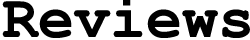
<style>
.page{position:relative;width:250px;height:40px;background:#ffffff}
.page>*{position:absolute;margin:0}
.t1{font:60px "CourierNewPS-BoldMT";color:#000000}
</style>
<div class="page">
<p class="t1" style="left:2px;top:0px;width:248px;height:38px">Reviews</p>
</div>
